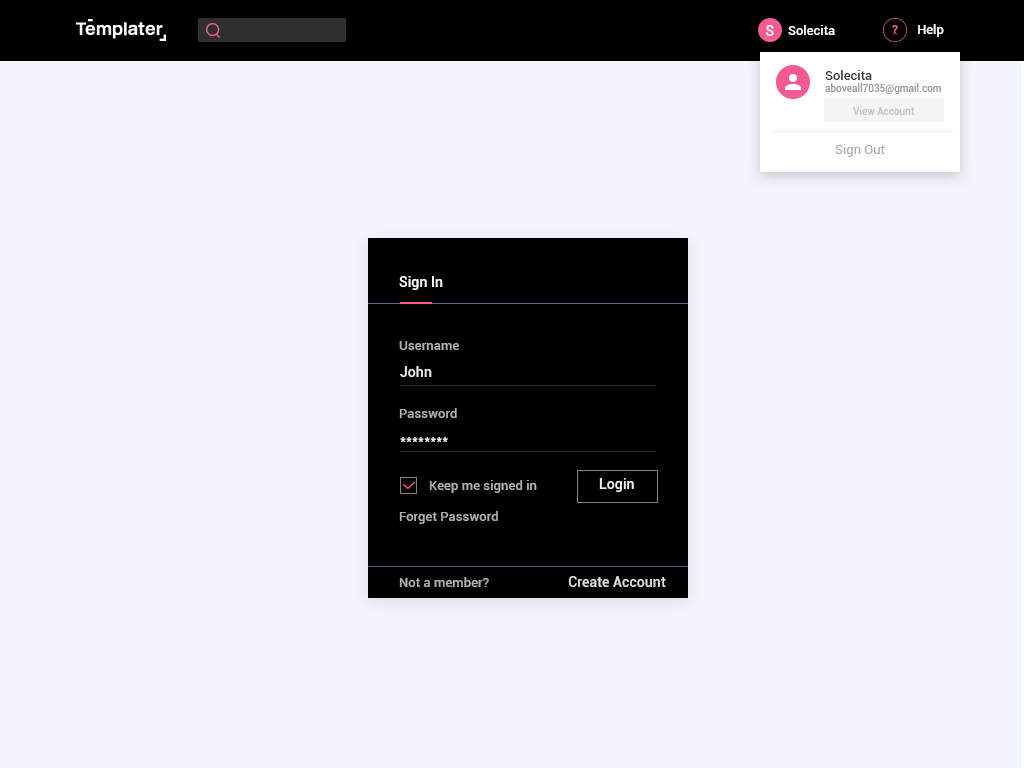
<style>
.page{position:relative;width:1024px;height:768px;background:#f2f5fe}
.page>*{position:absolute;margin:0}
.t1{font:14.2px "Roboto-Medium";color:#ffffff}
.t2{font:13px "Roboto-Medium";color:#ffffff}
.t3{font:10px "Roboto-Medium";color:#8f8f8f}
.t4{font:13px "Roboto-Medium";color:#000000}
.t5{font:10px "Roboto-Medium";color:#c4c4c4}
.t6{font:13px "Roboto-Regular";color:#aeaeae}
.t7{font:14px "Roboto-Medium";color:#ffffff}
.t8{font:13px/17px "Roboto-Medium";color:#b0b0b0}
.t9{font:14px/17px "Roboto-Medium";color:#ffffff}
.t10{font:13px "Roboto-Medium";color:#b0b0b0}
.t11{font:14px "Roboto-Medium";color:#dddddd}
</style>
<div class="page">
<p class="t1" style="left:766px;top:25px;width:8px;height:11px">S</p>
<p class="t2" style="left:788px;top:25px;width:47px;height:10px">Solecita</p>
<p class="t2" style="left:918px;top:24px;width:26px;height:13px">Help</p>
<p class="t3" style="left:825px;top:70px;width:116px;height:25px;opacity:0.89"><span class="t4">Solecita<br></span>aboveall7035@gmail.com</p>
<p class="t5" style="left:853px;top:106px;width:62px;height:9px">View Account</p>
<p class="t6" style="left:835px;top:144px;width:50px;height:13px">Sign Out</p>
<p class="t7" style="left:399px;top:276px;width:44px;height:14px">Sign In</p>
<p class="t8" style="left:399px;top:341px;width:60px;height:77px">Username<br><br><br><br>Password</p>
<p class="t9" style="left:400px;top:366px;width:48px;height:76px;opacity:0.89">John<br><br><br><br>********</p>
<p class="t10" style="left:429px;top:480px;width:108px;height:13px">Keep me signed in</p>
<p class="t7" style="left:599px;top:478px;width:35px;height:14px;opacity:0.89">Login</p>
<p class="t10" style="left:399px;top:511px;width:99px;height:13px">Forget Password</p>
<p class="t10" style="left:399px;top:577px;width:90px;height:10px">Not a member?</p>
<p class="t11" style="left:568px;top:576px;width:98px;height:11px">Create Account</p>
</div>
